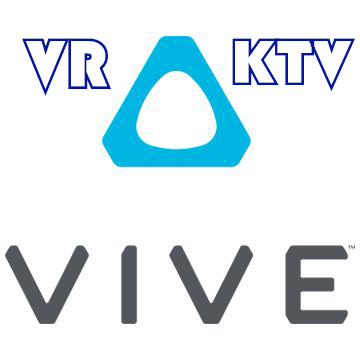
<style>
.page{position:relative;width:360px;height:360px;background:#ffffff}
.page>*{position:absolute;margin:0}
.t1{font:72.1px "STCaiyun";color:#01179e}
.t2{font:66.3px "STCaiyun";color:#01179e;scale:1.09 1}
</style>
<div class="page">
<p class="t1" style="left:22px;top:38px;width:89px;height:58px">VR</p>
<p class="t2" style="left:232px;top:38px;width:124px;height:54px">KTV</p>
</div>
